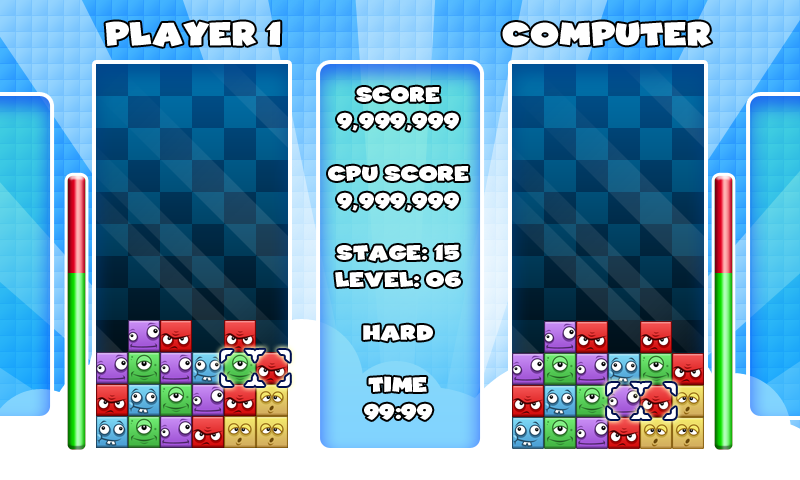
<style>
.page{position:relative;width:800px;height:480px}
.page>*{position:absolute;margin:0}
.t1{font:33.6px "CoopBlack";color:#ffffff}
.t2{font:22px "CoopBlack";color:#ffffff}
</style>
<div class="page">
<p class="t1" style="left:105px;top:21px;width:176px;height:26px">PLAYER 1</p>
<p class="t1" style="left:502px;top:21px;width:210px;height:25px">COMPUTER</p>
<p class="t2" style="left:328px;top:86px;width:141px;height:334px;text-align:center">Score<br>9,999,999<br><br>CPU Score<br>9,999,999<br><br>Stage: 15<br>Level: 06<br><br>HARD<br><br>Time<br>99:99</p>
</div>
